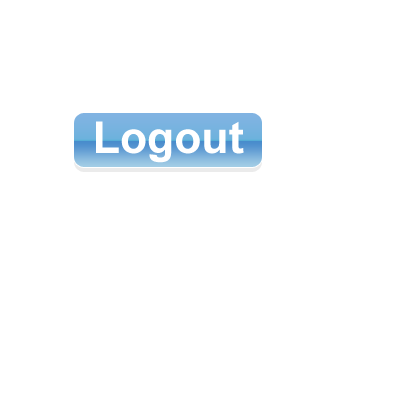
<style>
.page{position:relative;width:400px;height:400px;background:#ffffff}
.page>*{position:absolute;margin:0}
.t1{font:44.4px "Arial-BoldMT";color:#ffffff}
</style>
<div class="page">
<p class="t1" style="left:96px;top:121px;width:148px;height:42px">Logout</p>
</div>
